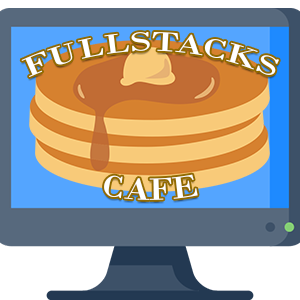
<style>
.page{position:relative;width:300px;height:300px}
.page>*{position:absolute;margin:0}
.t1{font:28.4px "BodoniMT";color:#ffffff}
.t2{font:31.9px "BodoniMT";color:#ffffff}
</style>
<div class="page">
<p class="t1" style="left:21px;top:32px;width:258px;height:46px">FULLSTACKS</p>
<p class="t2" style="left:104px;top:174px;width:94px;height:26px">CAFE</p>
</div>
